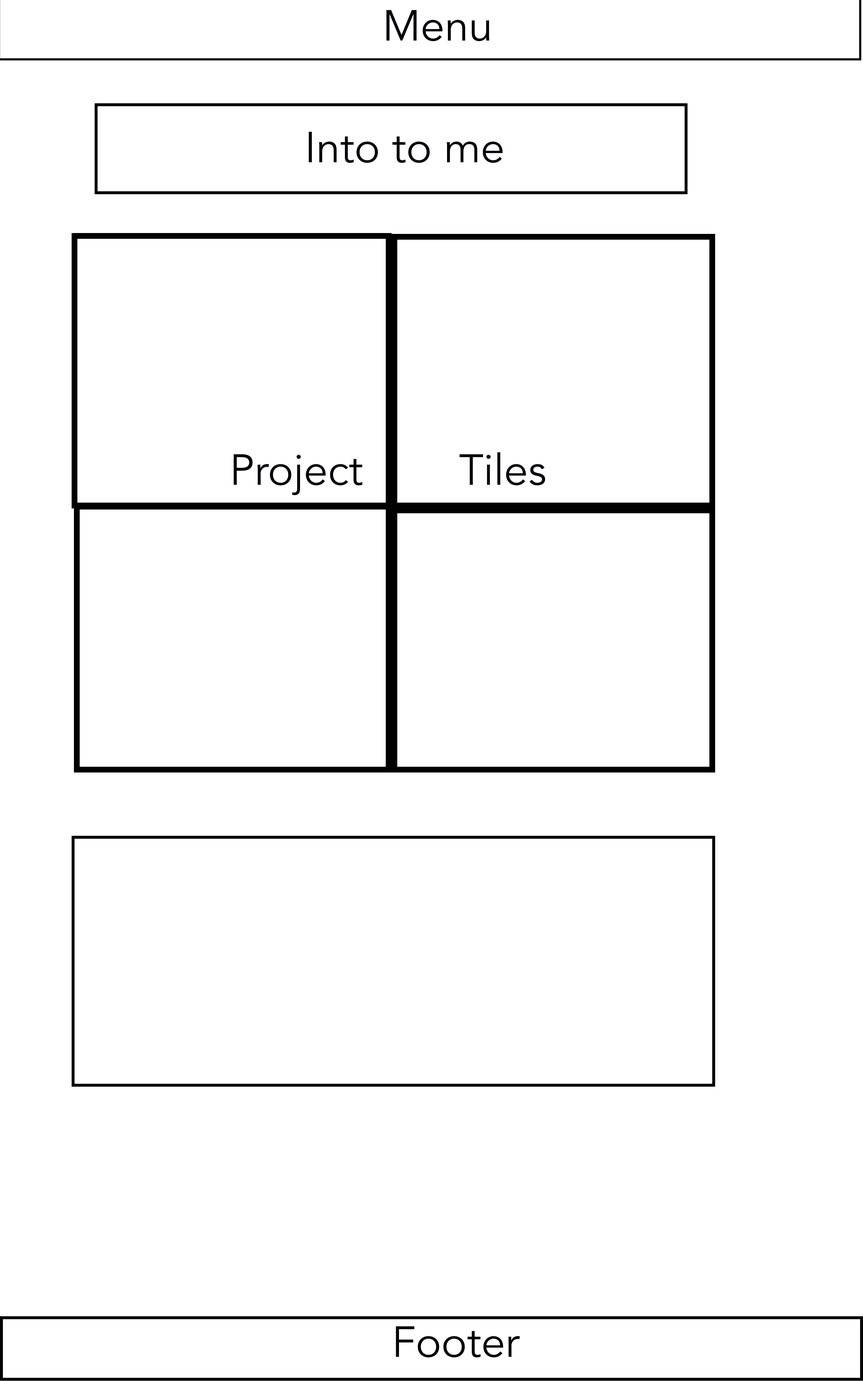
<style>
.page{position:relative;width:863px;height:1381px;background:#ffffff}
.page>*{position:absolute;margin:0}
.t1{font:43.2px "AvenirLTStd-Book";color:#010108}
</style>
<div class="page">
<p class="t1" style="left:386px;top:10px;width:103px;height:31px">Menu</p>
<p class="t1" style="left:309px;top:132px;width:194px;height:31px">Into to me</p>
<p class="t1" style="left:234px;top:452px;width:311px;height:43px">Project        Tiles</p>
<p class="t1" style="left:396px;top:1326px;width:124px;height:32px">Footer</p>
</div>
